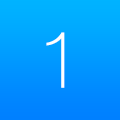
<style>
.page{position:relative;width:120px;height:120px}
.page>*{position:absolute;margin:0}
.t1{font:80px "HelveticaNeue-Thin";color:#fefefe}
</style>
<div class="page">
<p class="t1" style="left:46px;top:32px;width:19px;height:56px">1</p>
</div>
